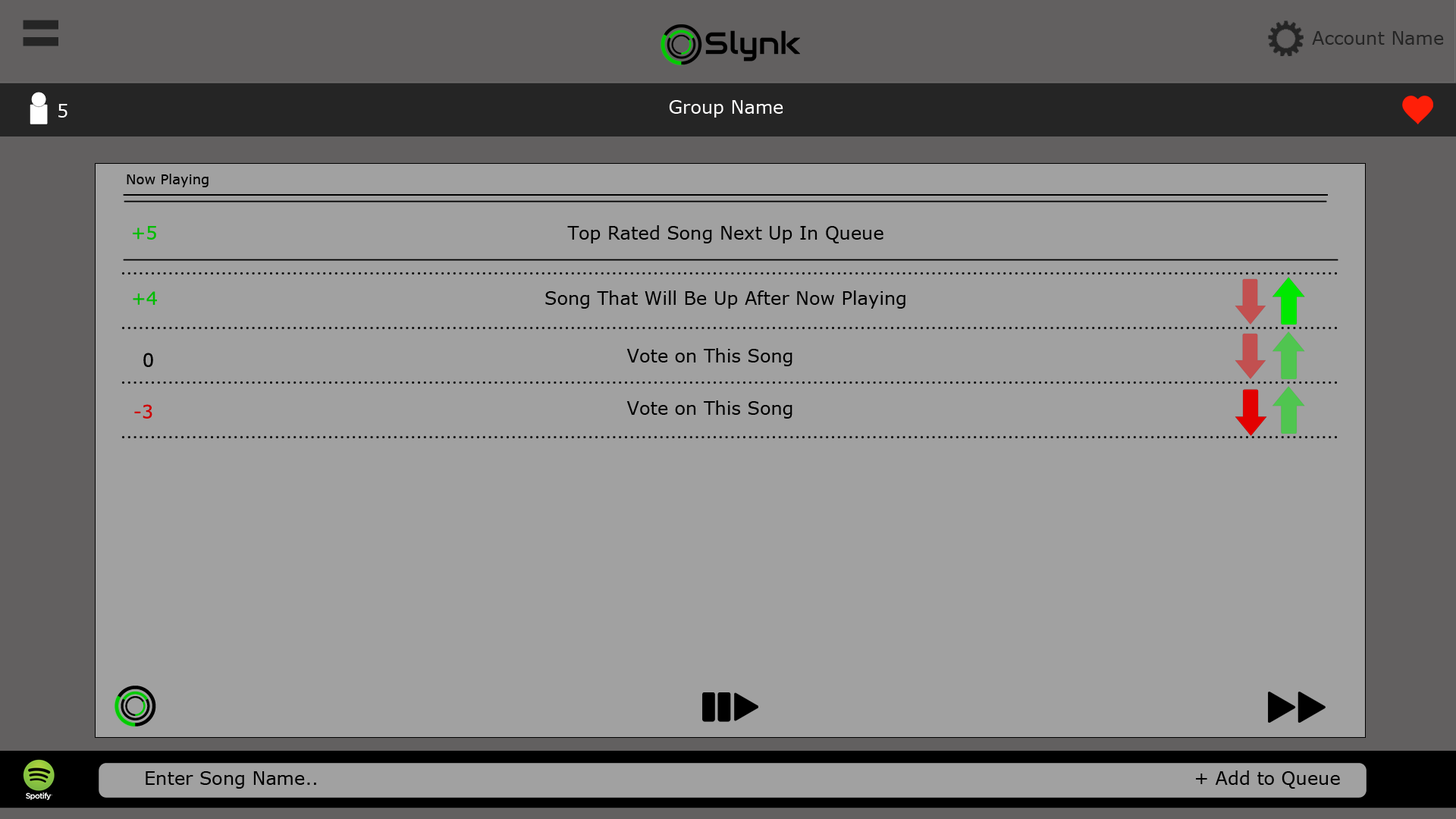
<style>
.page{position:relative;width:1456px;height:819px;background:#a1a1a1}
.page>*{position:absolute;margin:0}
.t1{font:18.2px "Verdana";color:#252525}
.t2{font:18.2px "Verdana";color:#fffefe}
.t3{font:13.6px "Verdana";color:#000000}
.t4{font:18.2px "Verdana";color:#00bd00}
.t5{font:18.2px "Verdana";color:#000000}
.t6{font:18.2px "Verdana";color:#cf0001}
</style>
<div class="page">
<p class="t1" style="left:1312px;top:31px;width:132px;height:14px">Account Name</p>
<p class="t2" style="left:669px;top:100px;width:114px;height:18px">Group Name</p>
<p class="t2" style="left:58px;top:104px;width:9px;height:14px">5</p>
<p class="t3" style="left:127px;top:174px;width:82px;height:13px">Now Playing</p>
<p class="t4" style="left:133px;top:226px;width:23px;height:14px">+5</p>
<p class="t5" style="left:545px;top:225px;width:360px;height:84px;text-align:center">Top Rated Song Next Up In Queue<br><br><br>Song That Will Be Up After Now Playing</p>
<p class="t4" style="left:133px;top:291px;width:24px;height:14px">+4</p>
<p class="t5" style="left:143px;top:353px;width:10px;height:14px">0</p>
<p class="t5" style="left:626px;top:348px;width:166px;height:18px">Vote on This Song</p>
<p class="t5" style="left:626px;top:400px;width:166px;height:19px">Vote on This Song</p>
<p class="t6" style="left:134px;top:404px;width:18px;height:15px">-3</p>
<p class="t5" style="left:146px;top:771px;width:170px;height:18px">Enter Song Name..</p>
<p class="t5" style="left:1196px;top:770px;width:144px;height:19px">+ Add to Queue</p>
</div>
